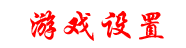
<style>
.page{position:relative;width:186px;height:48px;background:#ffffff}
.page>*{position:absolute;margin:0}
.t1{font:36px "STXingkai";color:#ff0000}
</style>
<div class="page">
<p class="t1" style="left:30px;top:10px;width:134px;height:31px">游戏设置</p>
</div>
